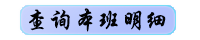
<style>
.page{position:relative;width:200px;height:40px;background:#ffffff}
.page>*{position:absolute;margin:0}
.t1{font:24px "STXingkai";color:#030303}
</style>
<div class="page">
<p class="t1" style="left:29px;top:8px;width:137px;height:24px">查询本班明细</p>
</div>
